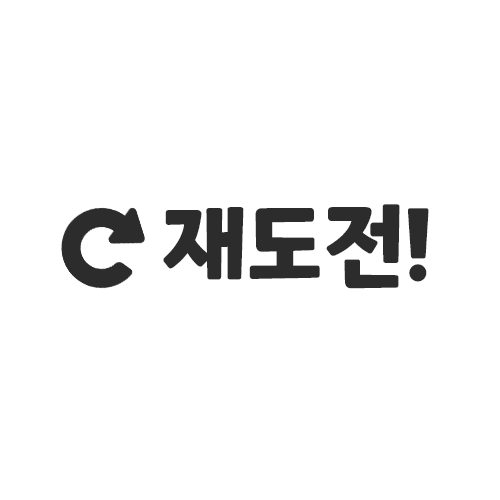
<style>
.page{position:relative;width:500px;height:500px;background:#ffffff}
.page>*{position:absolute;margin:0}
.t1{font:94.2px "ONEMobilePOPOTFRegular";color:#2c2c2c}
</style>
<div class="page">
<p class="t1" style="left:163px;top:204px;width:266px;height:85px">재도전!</p>
</div>
